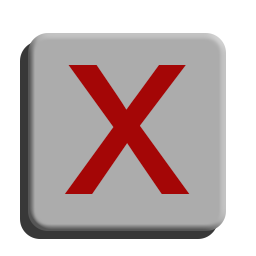
<style>
.page{position:relative;width:256px;height:256px;background:#acacac}
.page>*{position:absolute;margin:0}
.t1{font:249px "ArialNarrow";color:#a40606;scale:1.26 1}
</style>
<div class="page">
<p class="t1" style="left:64px;top:65px;width:126px;height:129px">x</p>
</div>
